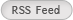
<style>
.page{position:relative;width:73px;height:20px;background:#e8e6e6}
.page>*{position:absolute;margin:0}
.t1{font:11.2px "LucidaSans";letter-spacing:0.1em;color:#545353}
</style>
<div class="page">
<p class="t1" style="left:12px;top:5px;width:48px;height:9px">RSS Feed</p>
</div>
